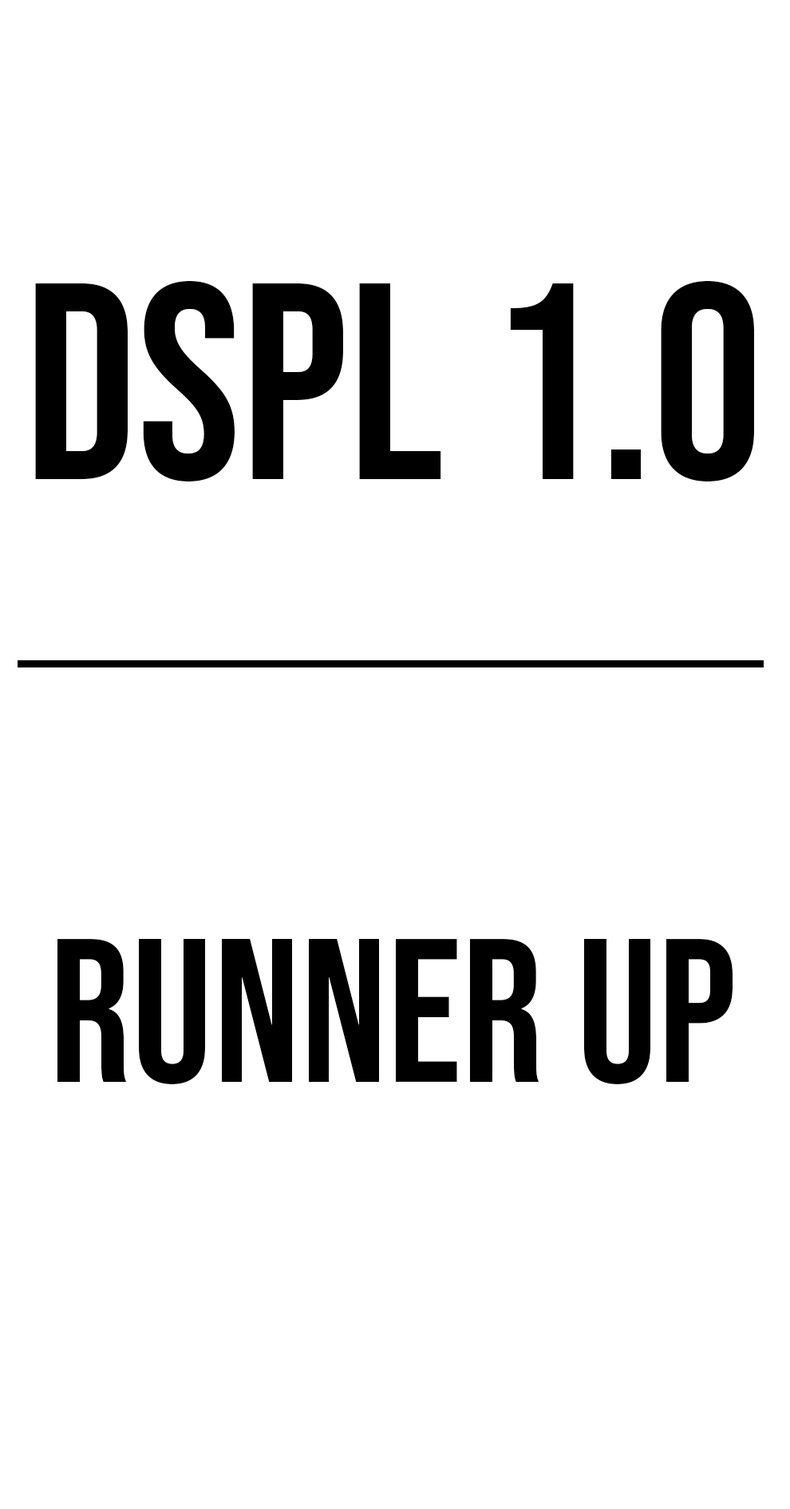
<style>
.page{position:relative;width:790px;height:1509px;background:#ffffff}
.page>*{position:absolute;margin:0}
.t1{font:279px "BebasNeue-Regular";color:#000000}
.t2{font:204.5px "BebasNeue-Regular";color:#000000}
</style>
<div class="page">
<p class="t1" style="left:35px;top:281px;width:719px;height:201px">DSPL 1.0</p>
<p class="t2" style="left:57px;top:939px;width:676px;height:145px">Runner UP</p>
</div>
